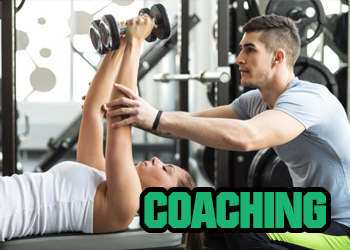
<style>
.page{position:relative;width:350px;height:250px}
.page>*{position:absolute;margin:0}
.t1{font:50px "Autumn";letter-spacing:-0.025em;color:#1cb472}
</style>
<div class="page">
<p class="t1" style="left:144px;top:192px;width:182px;height:36px">COACHING</p>
</div>
